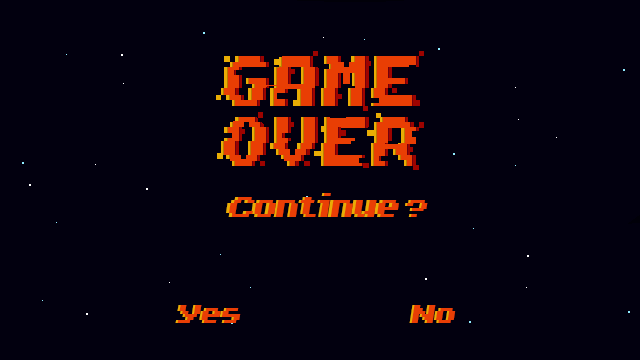
<style>
.page{position:relative;width:640px;height:360px;background:#02000f}
.page>*{position:absolute;margin:0}
.t1{font:33.7px "Invasion2000";color:#eaad05}
.t2{font:33.7px "Invasion2000";color:#ea3e05}
.t3{font:31.5px "Invasion2000";color:#eaad05}
.t4{font:31.5px "Invasion2000";color:#ea3e05}
.t5{font:30px "Invasion2000";color:#eaad05}
.t6{font:30px "Invasion2000";color:#ea3e05}
</style>
<div class="page">
<p class="t1" style="left:226px;top:193px;width:170px;height:24px">Continue</p>
<p class="t2" style="left:229px;top:193px;width:170px;height:24px">Continue</p>
<p class="t3" style="left:405px;top:200px;width:21px;height:17px">?</p>
<p class="t4" style="left:407px;top:200px;width:21px;height:17px">?</p>
<p class="t5" style="left:175px;top:305px;width:64px;height:18px">Yes</p>
<p class="t6" style="left:177px;top:305px;width:64px;height:18px">Yes</p>
<p class="t5" style="left:409px;top:305px;width:45px;height:18px">No</p>
<p class="t6" style="left:411px;top:305px;width:45px;height:18px">No</p>
</div>
